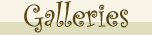
<style>
.page{position:relative;width:152px;height:35px;background:#f8f5e6}
.page>*{position:absolute;margin:0}
.t1{font:33.3px "CurlzMT";color:#584818}
</style>
<div class="page">
<p class="t1" style="left:24px;top:1px;width:104px;height:32px">Galleries</p>
</div>
